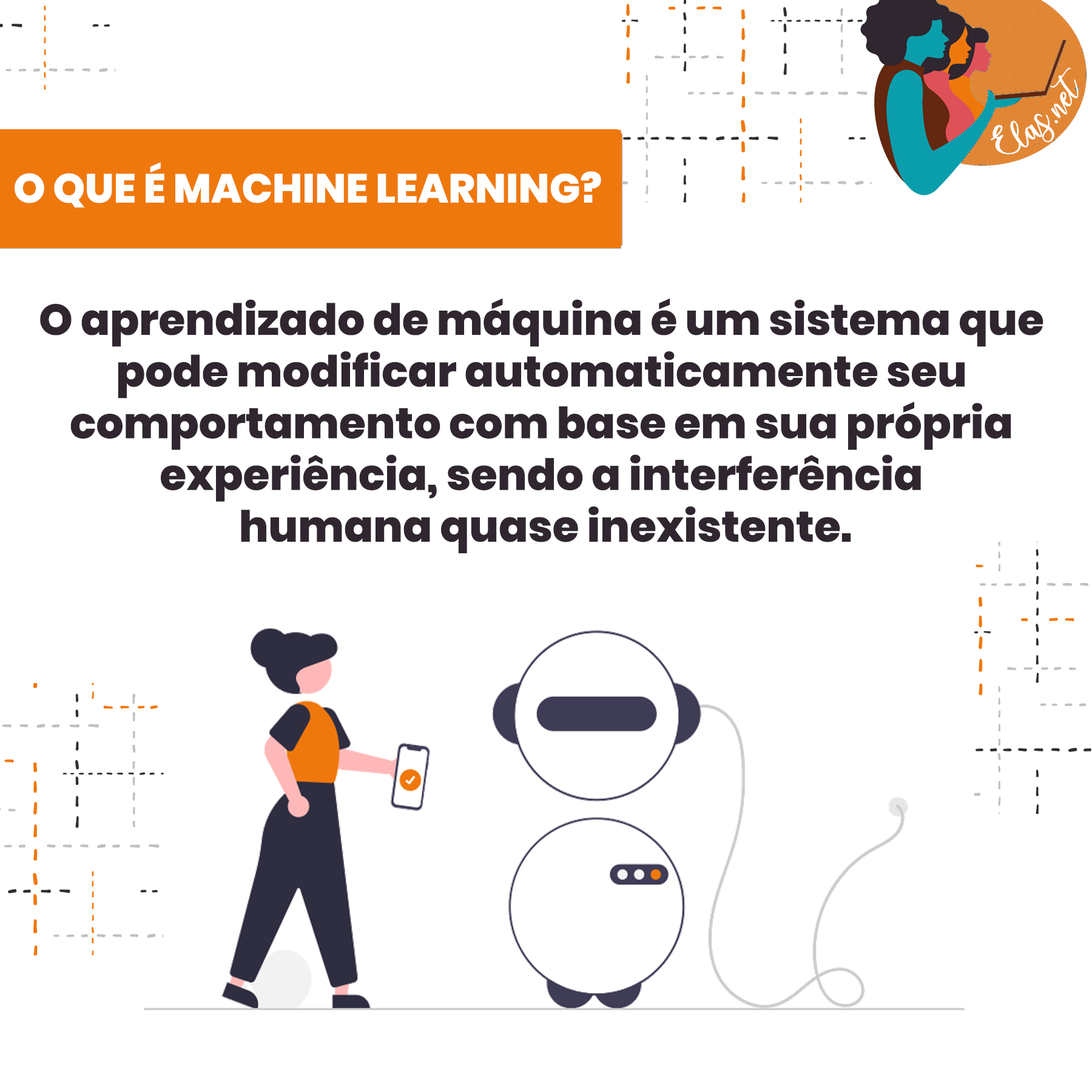
<style>
.page{position:relative;width:1092px;height:1092px;background:#ffffff}
.page>*{position:absolute;margin:0}
.t1{font:25px "charlinda-Regular";color:#ffffff;scale:1.18 1}
.t2{font:40.6px "Poppins-ExtraBold";color:#ffffff;text-transform:uppercase}
.t3{font:43.1px "Poppins-ExtraBold";color:#2f262f}
</style>
<div class="page">
<p class="t1" style="left:991px;top:67px;width:88px;height:88px;rotate:-42deg">Elas.net</p>
<p class="t2" style="left:15px;top:162px;width:586px;height:45px">O que É MACHINE LEARNING?</p>
<p class="t3" style="left:40px;top:298px;width:1003px;height:255px;text-align:center">O aprendizado de máquina é um sistema que <br>pode modificar automaticamente seu <br>comportamento com base em sua própria <br>experiência, sendo a interferência <br>humana quase inexistente.</p>
</div>
